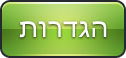
<style>
.page{position:relative;width:126px;height:58px}
.page>*{position:absolute;margin:0}
.t1{font:30px "ArialUnicodeMS";color:#ffffff}
</style>
<div class="page">
<p class="t1" style="left:19px;top:21px;width:88px;height:17px">תורדגה</p>
</div>
